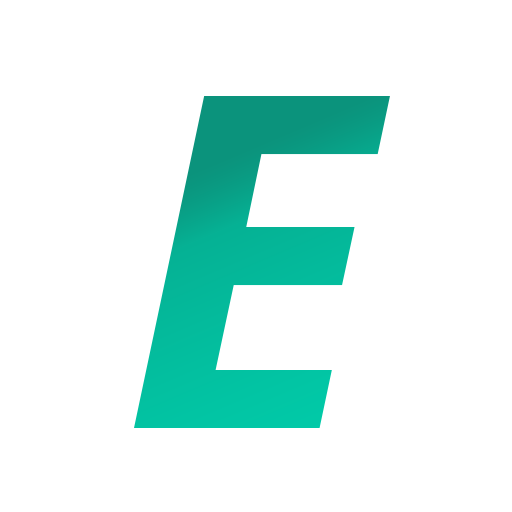
<style>
.page{position:relative;width:512px;height:512px;background:#ffffff}
.page>*{position:absolute;margin:0}
.t1{font:464.7px "OpenSans-BoldItalic"}
</style>
<div class="page">
<p class="t1" style="left:134px;top:96px;width:256px;height:332px">E</p>
</div>
